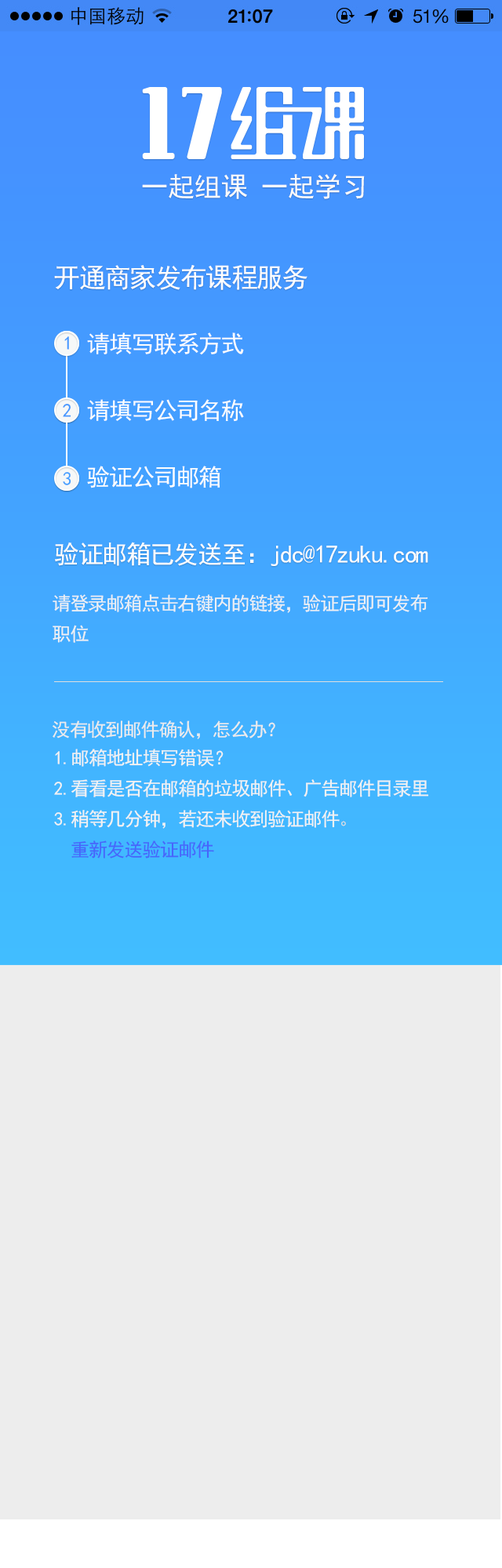
<style>
.page{position:relative;width:502px;height:1568px;background:#ededed}
.page>*{position:absolute;margin:0}
.t1{font:26.7px "SimHei";color:#fbfbfb}
.t2{font:26.7px "SimHei";letter-spacing:-0.05em;color:#fefefe}
.t3{font:18.8px "SimHei";color:#4498ff}
.t4{font:23.5px "SimHei";letter-spacing:-0.05em;color:#fefefe}
.t5{font:18.8px "SimHei";color:#4497ff}
.t6{font:18.8px "SimHei";color:#449fff}
.t7{font:25.1px "SimHei";letter-spacing:-0.05em;color:#fefefe}
.t8{font:18.8px "SimHei";letter-spacing:-0.05em;color:#edf0f3}
.t9{font:18.8px "SimHei";letter-spacing:-0.05em;color:#ececec}
.t10{font:18.8px "SimHei";letter-spacing:-0.05em;color:#f2f2f2}
.t11{font:18.8px "SimHei";letter-spacing:-0.05em;color:#dfdfdf}
.t12{font:18.8px "SimHei";letter-spacing:-0.05em;color:#4765fb}
</style>
<div class="page">
<p class="t1" style="left:142px;top:173px;width:223px;height:26px">一起组课 一起学习</p>
<p class="t2" style="left:54px;top:265px;width:253px;height:25px">开通商家发布课程服务</p>
<p class="t3" style="left:64px;top:336px;width:5px;height:14px">1</p>
<p class="t4" style="left:87px;top:332px;width:157px;height:23px">请填写联系方式</p>
<p class="t4" style="left:87px;top:399px;width:157px;height:23px">请填写公司名称</p>
<p class="t5" style="left:63px;top:404px;width:8px;height:13px">2</p>
<p class="t6" style="left:63px;top:472px;width:8px;height:13px">3</p>
<p class="t4" style="left:87px;top:466px;width:134px;height:22px">验证公司邮箱</p>
<p class="t7" style="left:55px;top:542px;width:373px;height:24px">验证邮箱已发送至：jdc@17zuku.com</p>
<p class="t8" style="left:53px;top:594px;width:375px;height:49px">请登录邮箱点击右键内的链接，验证后即可发布<br>职位</p>
<p class="t9" style="left:53px;top:720px;width:222px;height:19px">没有收到邮件确认，怎么办？</p>
<p class="t10" style="left:54px;top:749px;width:375px;height:109px">1.邮箱地址填写错误？<br>2.看看是否在邮箱的垃圾邮件、广告邮件目录里<br>3.稍等几分钟，若还未收到验证邮件<span class="t11">。<br>  </span><span class="t12">重新发送验证邮件</span></p>
</div>
